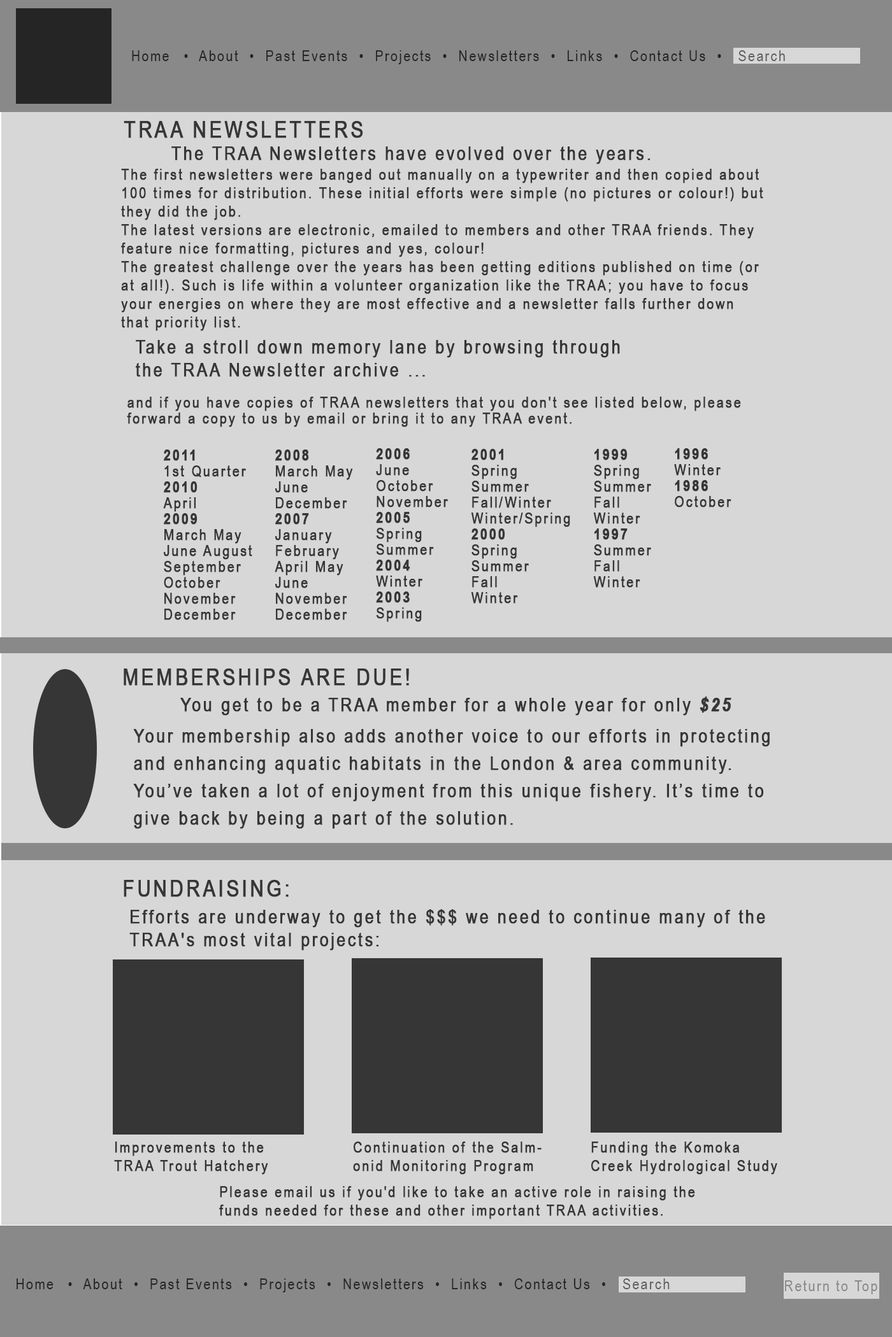
<style>
.page{position:relative;width:892px;height:1337px;background:#d7d7d7}
.page>*{position:absolute;margin:0}
.t1{font:15.3px "ArialNarrow";letter-spacing:0.1em;color:#252525}
.t2{font:15.3px "ArialNarrow";letter-spacing:0.1em;color:#5f5f5f}
.t3{font:22.9px "ArialNarrow";letter-spacing:0.1em;color:#363636;text-transform:uppercase;font-weight:bold}
.t4{font:19.1px "ArialNarrow";letter-spacing:0.1em;color:#363636;font-weight:bold}
.t5{font:15.3px/18.5px "ArialNarrow";letter-spacing:0.1em;color:#363636;font-weight:bold}
.t6{font:15.3px/15.9px "ArialNarrow";letter-spacing:0.1em;color:#363636;font-weight:bold}
.t7{font:15.3px/15.9px "ArialNarrow-Bold";letter-spacing:0.1em;color:#363636;font-weight:bold}
.t8{font:22.9px "ArialNarrow";letter-spacing:0.1em;color:#363636;font-weight:bold}
.t9{font:19.1px "ArialNarrow-BoldItalic";letter-spacing:0.1em;color:#363636;font-weight:bold}
.t10{font:19.1px/27.4px "ArialNarrow";letter-spacing:0.1em;color:#363636;font-weight:bold}
.t11{font:15.3px "ArialNarrow";letter-spacing:0.1em;color:#363636;font-weight:bold}
.t12{font:15.3px "ArialNarrow";letter-spacing:0.1em;color:#898989}
.t13{font:10.2px "ArialNarrow";letter-spacing:0.1em;color:#898989}
</style>
<div class="page">
<p class="t1" style="left:132px;top:50px;width:653px;height:14px">Home  •  About  •  Past Events  •  Projects  •  Newsletters  •  Links  •  Contact Us  •   <span class="t2">Search</span></p>
<p class="t3" style="left:124px;top:121px;width:239px;height:17px">TRAA Newsletters</p>
<p class="t4" style="left:171px;top:146px;width:479px;height:18px">The TRAA Newsletters have evolved over the years.</p>
<p class="t5" style="left:121px;top:169px;width:642px;height:162px">The first newsletters were banged out manually on a typewriter and then copied about <br>100 times for distribution. These initial efforts were simple (no pictures or colour!) but <br>they did the job.<br>The latest versions are electronic, emailed to members and other TRAA friends. They <br>feature nice formatting, pictures and yes, colour!<br>The greatest challenge over the years has been getting editions published on time (or <br>at all!). Such is life within a volunteer organization like the TRAA; you have to focus <br>your energies on where they are most effective and a newsletter falls further down <br>that priority list.</p>
<p class="t4" style="left:136px;top:340px;width:484px;height:37px">Take a stroll down memory lane by browsing through <br>the TRAA Newsletter archive ...</p>
<p class="t6" style="left:127px;top:397px;width:614px;height:30px">and if you have copies of TRAA newsletters that you don't see listed below, please <br>forward a copy to us by email or bring it to any TRAA event.</p>
<p class="t6" style="left:163px;top:450px;width:89px;height:170px"><span class="t7">2011 <br></span>1st Quarter<br><span class="t7">2010</span> <br>April<br><span class="t7">2009</span> <br>March May <br>June August <br>September <br>October <br>November <br>December</p>
<p class="t6" style="left:274px;top:450px;width:79px;height:170px"><span class="t7">2008<br></span>March May <br>June <br>December<br><span class="t7">2007<br></span>January <br>February <br>April May <br>June <br>November <br>December</p>
<p class="t6" style="left:376px;top:448px;width:72px;height:174px"><span class="t7">2006<br></span>June <br>October <br>November<br><span class="t7">2005<br></span>Spring <br>Summer<br><span class="t7">2004<br></span>Winter<br><span class="t7">2003<br></span>Spring</p>
<p class="t6" style="left:471px;top:449px;width:99px;height:155px"><span class="t7">2001<br></span>Spring <br>Summer <br>Fall/Winter <br>Winter/Spring<br><span class="t7">2000<br></span>Spring <br>Summer <br>Fall <br>Winter</p>
<p class="t6" style="left:593px;top:449px;width:58px;height:139px"><span class="t7">1999<br></span>Spring <br>Summer <br>Fall <br>Winter<br><span class="t7">1997<br></span>Summer <br>Fall <br>Winter</p>
<p class="t6" style="left:674px;top:448px;width:57px;height:60px"><span class="t7">1996<br></span>Winter<br><span class="t7">1986<br></span>October</p>
<p class="t8" style="left:124px;top:669px;width:285px;height:17px">MEMBERSHIPS ARE DUE!</p>
<p class="t4" style="left:180px;top:697px;width:551px;height:19px">You get to be a TRAA member for a whole year for only <span class="t9">$25</span></p>
<p class="t10" style="left:133px;top:729px;width:636px;height:100px">Your membership also adds another voice to our efforts in protecting <br>and enhancing aquatic habitats in the London &amp; area community.<br>You’ve taken a lot of enjoyment from this unique fishery. It’s time to<br>give back by being a part of the solution.</p>
<p class="t8" style="left:124px;top:880px;width:164px;height:17px">FUNDRAISING:</p>
<p class="t4" style="left:129px;top:909px;width:636px;height:42px">Efforts are underway to get the $$$ we need to continue many of the<br>TRAA's most vital projects:</p>
<p class="t11" style="left:114px;top:1142px;width:154px;height:33px">Improvements to the<br>TRAA Trout Hatchery</p>
<p class="t11" style="left:353px;top:1142px;width:188px;height:33px">Continuation of the Salm-<br>onid Monitoring Program</p>
<p class="t11" style="left:591px;top:1142px;width:186px;height:33px">Funding the Komoka<br>Creek Hydrological Study</p>
<p class="t11" style="left:219px;top:1186px;width:476px;height:34px">Please email us if you'd like to take an active role in raising the <br>funds needed for these and other important TRAA activities.</p>
<p class="t1" style="left:17px;top:1279px;width:652px;height:14px">Home  •  About  •  Past Events  •  Projects  •  Newsletters  •  Links  •  Contact Us  •   <span class="t2">Search</span></p>
<p class="t12" style="left:785px;top:1281px;width:92px;height:14px"><span class="t13"><br></span>Return to Top</p>
</div>
